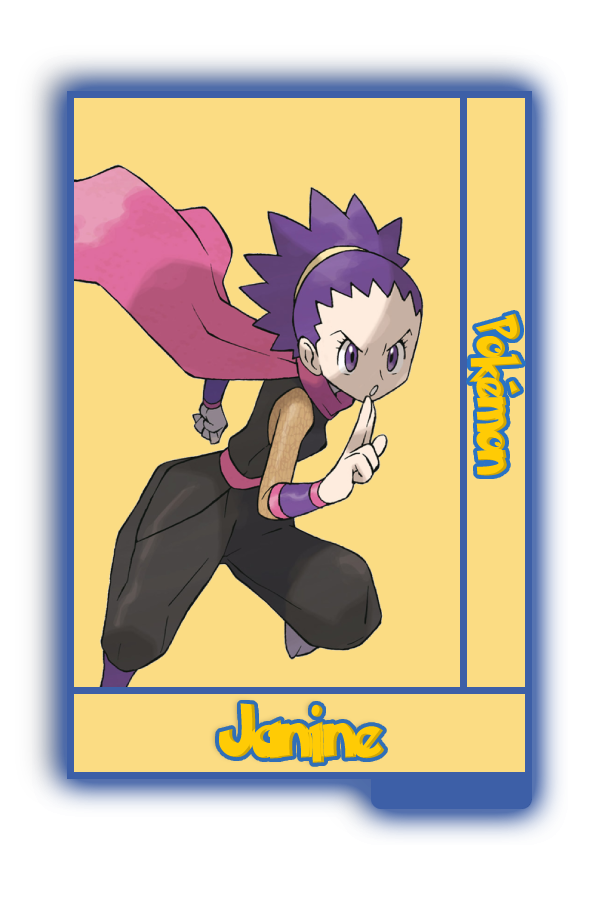
<style>
.page{position:relative;width:600px;height:900px;background:#fbdc83}
.page>*{position:absolute;margin:0}
.t1{font:48.8px "PokemonSolidNormal";color:#ffcb05;scale:0.8 1}
.t2{font:56.6px "PokemonSolidNormal";color:#ffcb05;scale:0.92 1}
</style>
<div class="page">
<p class="t1" style="left:469px;top:313px;width:54px;height:163px;rotate:90deg">Pokémon</p>
<p class="t2" style="left:218px;top:703px;width:167px;height:60px">Janine</p>
</div>
